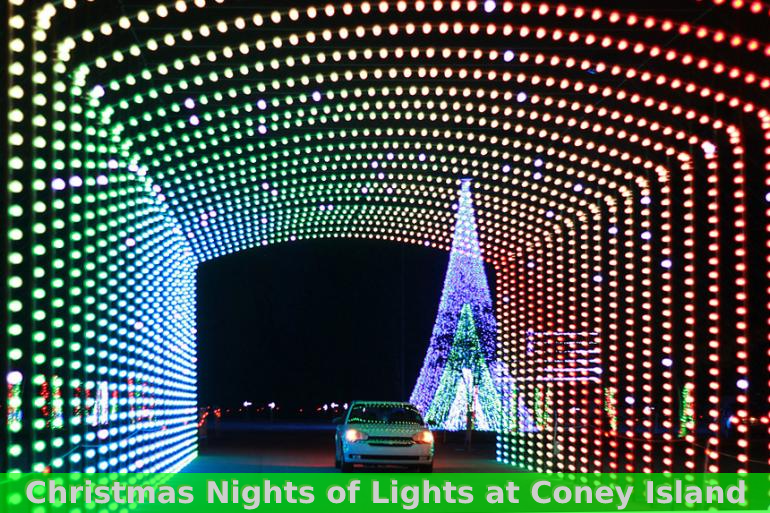
<style>
.page{position:relative;width:770px;height:513px}
.page>*{position:absolute;margin:0}
.t1{font:30px "DejaVuSans-Bold"}
.t2{font:30px "DejaVuSans-Bold";color:#cecece}
</style>
<div class="page">
<p class="t1" style="left:24px;top:478px;width:719px;height:30px">Christmas Nights of Lights at Coney Island Christmas Nights of Lights at Coney Island Downtown</p>
<p class="t2" style="left:26px;top:480px;width:719px;height:30px">Christmas Nights of Lights at Coney Island Christmas Nights of Lights at Coney Island Downtown</p>
</div>
